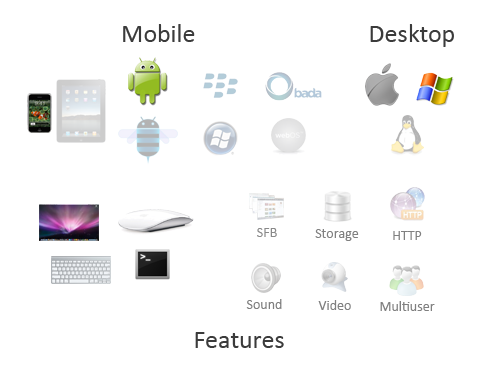
<style>
.page{position:relative;width:490px;height:375px;background:#ffffff}
.page>*{position:absolute;margin:0}
.t1{font:26px "Calibri";color:#3b3b3b}
.t2{font:14px "Calibri";color:#898989}
.t3{font:14px "Calibri";color:#808080}
.t4{font:14px "Calibri";color:#7f7f7f}
</style>
<div class="page">
<p class="t1" style="left:123px;top:24px;width:72px;height:18px">Mobile</p>
<p class="t1" style="left:370px;top:24px;width:84px;height:23px">Desktop</p>
<p class="t2" style="left:257px;top:228px;width:20px;height:9px">SFB</p>
<p class="t3" style="left:315px;top:229px;width:44px;height:12px">Storage</p>
<p class="t3" style="left:393px;top:231px;width:29px;height:9px">HTTP</p>
<p class="t4" style="left:246px;top:299px;width:36px;height:10px">Sound</p>
<p class="t3" style="left:318px;top:300px;width:33px;height:10px">Video</p>
<p class="t3" style="left:380px;top:301px;width:55px;height:10px">Multiuser</p>
<p class="t1" style="left:195px;top:332px;width:89px;height:16px">Features</p>
</div>
